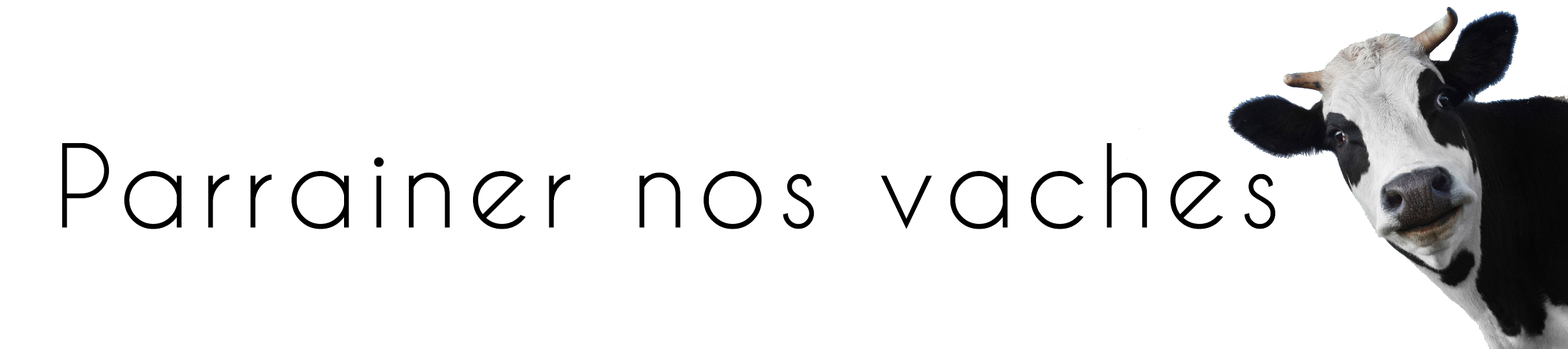
<style>
.page{position:relative;width:1568px;height:349px;background:#ffffff}
.page>*{position:absolute;margin:0}
.t1{font:108px "CaviarDreams";letter-spacing:0.1em;color:#000000}
</style>
<div class="page">
<p class="t1" style="left:62px;top:143px;width:1214px;height:86px">Parrainer nos vaches</p>
</div>
